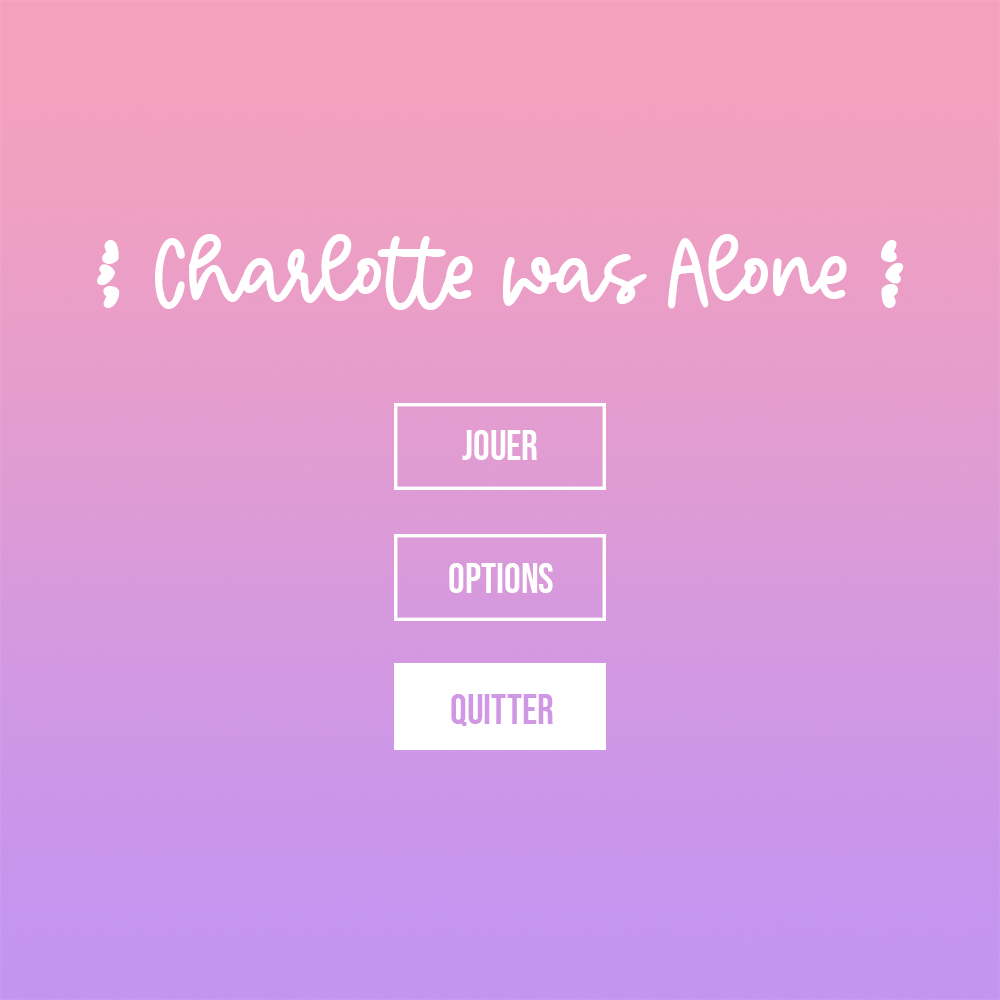
<style>
.page{position:relative;width:1000px;height:1000px}
.page>*{position:absolute;margin:0}
.t1{font:100px "SparklingDemo";color:#ffffff}
.t2{font:41.7px "BebasNeue-Regular";color:#ffffff}
.t3{font:41.7px "BebasNeue-Regular";color:#d098e4}
</style>
<div class="page">
<p class="t1" style="left:97px;top:234px;width:807px;height:76px">( Charlotte was Alone )</p>
<p class="t2" style="left:462px;top:430px;width:75px;height:30px">JOUER</p>
<p class="t2" style="left:449px;top:563px;width:104px;height:30px">OPTIONS</p>
<p class="t3" style="left:451px;top:694px;width:102px;height:32px">QUITTER</p>
</div>
